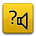
<style>
.page{position:relative;width:36px;height:36px}
.page>*{position:absolute;margin:0}
.t1{font:18px "Meiryo";color:#000000}
</style>
<div class="page">
<p class="t1" style="left:9px;top:10px;width:8px;height:14px">?</p>
</div>
